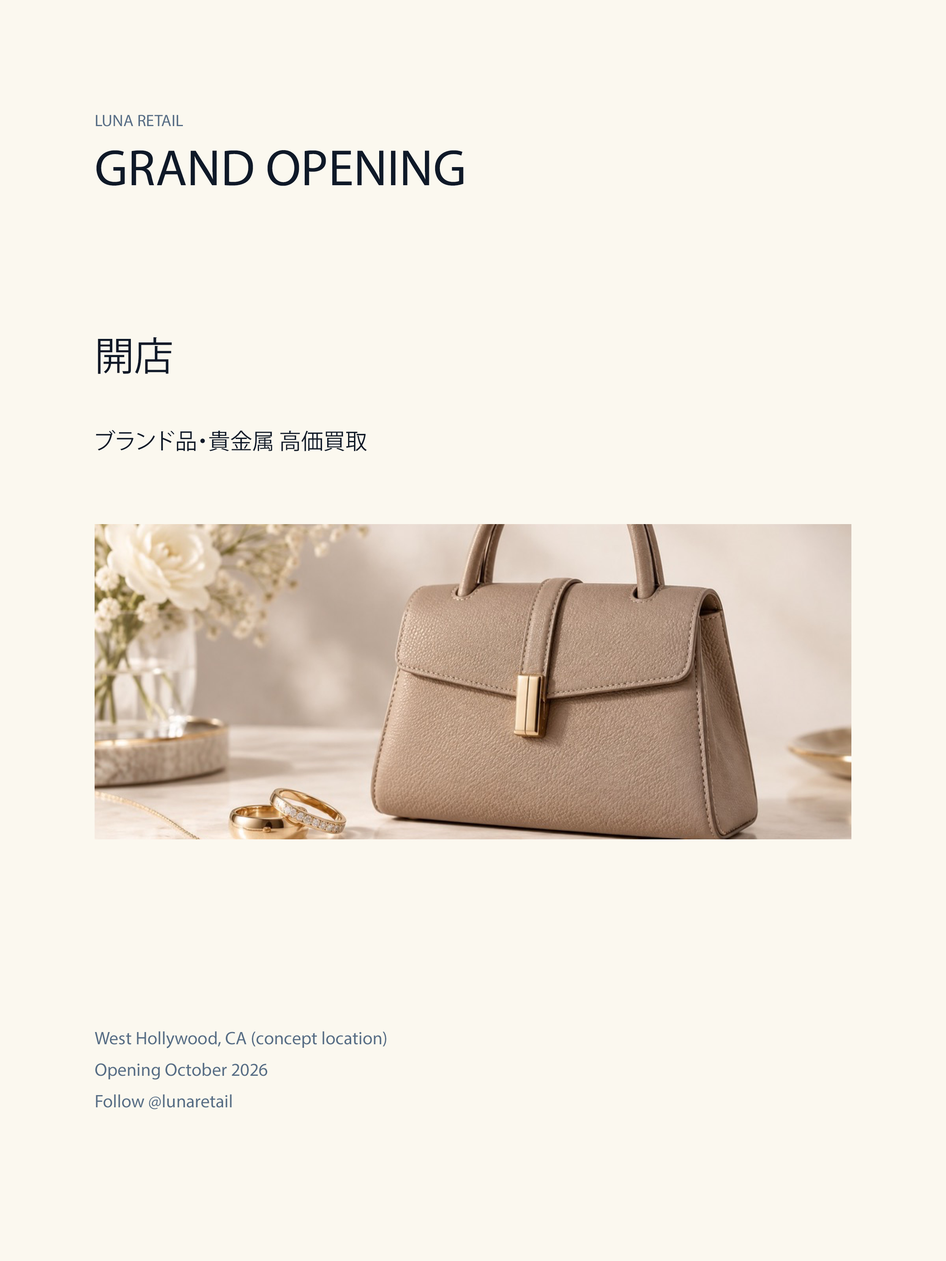
<style>
.page{position:relative;width:946px;height:1261px;background:#fbf8ef}
.page>*{position:absolute;margin:0}
.t1{font:16.5px "MyriadPro-Regular";color:#566d85}
.t2{font:51.2px "MyriadPro-Regular";color:#0f1928}
.t3{font:39.4px "KozGoPr6N-Regular";color:#0f1928}
.t4{font:22.1px "KozGoPr6N-Regular";color:#0f1928}
.t5{font:18.1px "MyriadPro-Regular";color:#566d85}
</style>
<div class="page">
<p class="t1" style="left:96px;top:115px;width:87px;height:11px">LUNA RETAIL</p>
<p class="t2" style="left:96px;top:150px;width:367px;height:36px">GRAND OPENING</p>
<p class="t3" style="left:98px;top:337px;width:74px;height:37px">開店</p>
<p class="t4" style="left:96px;top:430px;width:271px;height:21px">ブランド品・貴金属 高価買取</p>
<p class="t5" style="left:95px;top:1031px;width:291px;height:18px">West Hollywood, CA (concept location)</p>
<p class="t5" style="left:95px;top:1063px;width:172px;height:17px">Opening October 2026</p>
<p class="t5" style="left:96px;top:1094px;width:136px;height:15px">Follow @lunaretail</p>
</div>
